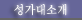
<style>
.page{position:relative;width:82px;height:20px;background:#666699}
.page>*{position:absolute;margin:0}
.t1{font:12px "BatangChe";color:#ffffff;scale:0.9 1}
</style>
<div class="page">
<p class="t1" style="left:14px;top:4px;width:53px;height:12px">성가대소개</p>
</div>
